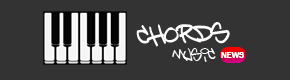
<style>
.page{position:relative;width:290px;height:80px;background:#333333}
.page>*{position:absolute;margin:0}
.t1{font:26.9px "Bringthanoize";color:#fcfcfc}
.t2{font:15.3px "Bringthanoize";color:#fcfcfc}
.t3{font:8.6px "FranklinGothic-Demi";color:#ffffff}
</style>
<div class="page">
<p class="t1" style="left:136px;top:22px;width:94px;height:25px;rotate:-3deg">CHORDS</p>
<p class="t2" style="left:172px;top:48px;width:44px;height:14px">MUSIC</p>
<p class="t3" style="left:221px;top:52px;width:23px;height:6px">NEWS</p>
</div>
